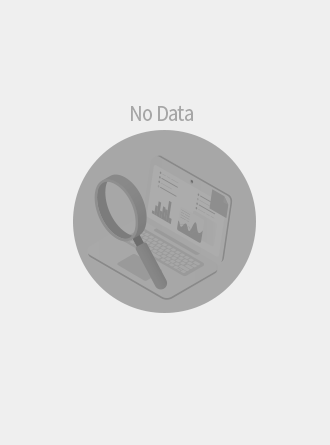
<style>
.page{position:relative;width:330px;height:445px;background:#efefef}
.page>*{position:absolute;margin:0}
.t1{font:20.4px "NotoSansCJKkr-Regular";letter-spacing:-0.05em;color:#a6a6a6;scale:0.93 1}
</style>
<div class="page">
<p class="t1" style="left:131px;top:105px;width:62px;height:16px">No Data</p>
</div>
